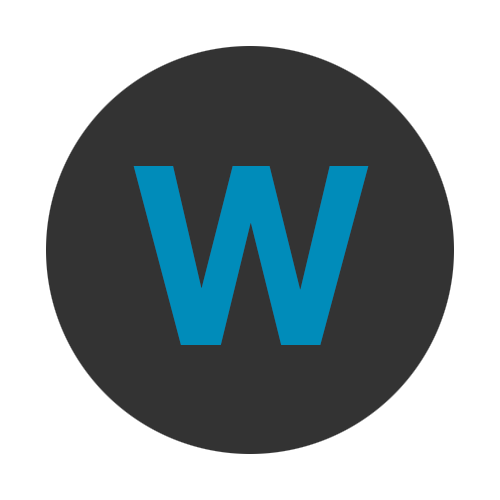
<style>
.page{position:relative;width:500px;height:500px;background:#ffffff}
.page>*{position:absolute;margin:0}
.t1{font:250px "HelveticaNeue-Bold";color:#008cba}
</style>
<div class="page">
<p class="t1" style="left:133px;top:166px;width:236px;height:179px">W</p>
</div>
